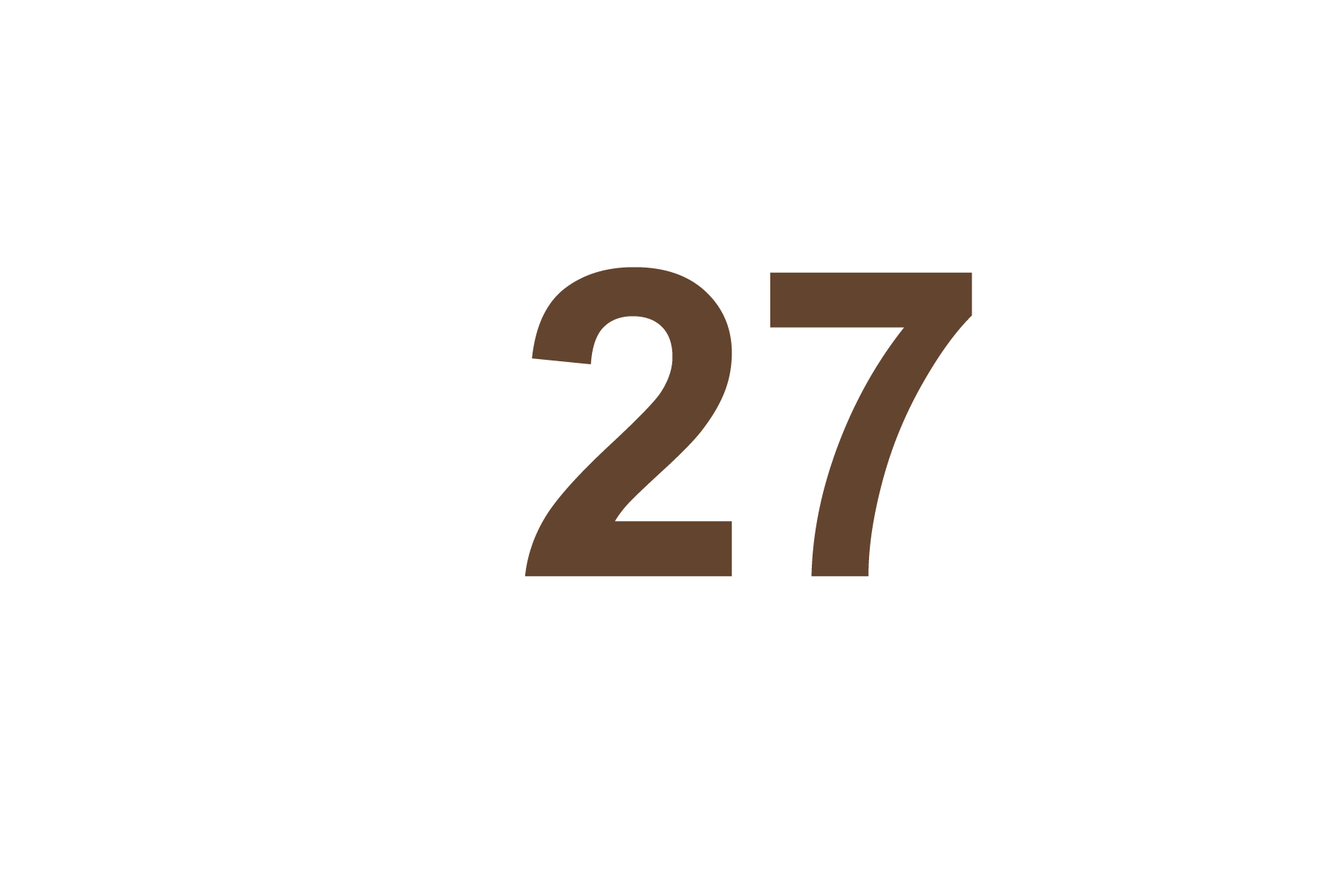
<style>
.page{position:relative;width:1337px;height:892px;background:#ffffff}
.page>*{position:absolute;margin:0}
.t1{font:429.6px "Arial-BoldMT";color:#63442f}
</style>
<div class="page">
<p class="t1" style="left:525px;top:267px;width:448px;height:310px">27</p>
</div>
